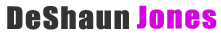
<style>
.page{position:relative;width:221px;height:34px;background:#ffffff}
.page>*{position:absolute;margin:0}
.t1{font:28.5px "Impact";letter-spacing:0.05em;color:#333333;scale:1.1 1}
.t2{font:28.5px "Impact";letter-spacing:0.05em;color:#d403df;scale:1.1 1}
</style>
<div class="page">
<p class="t1" style="left:7px;top:6px;width:122px;height:24px">DeShaun</p>
<p class="t2" style="left:137px;top:5px;width:80px;height:24px">Jones</p>
</div>
